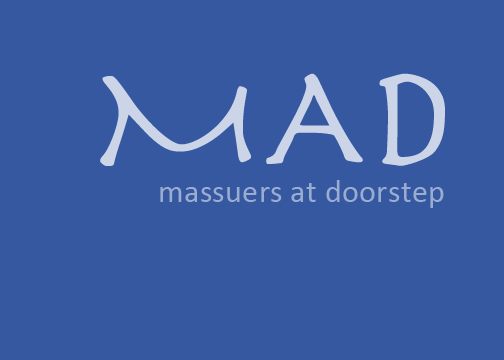
<style>
.page{position:relative;width:504px;height:360px;background:#3558a1}
.page>*{position:absolute;margin:0}
.t1{font:150px "Herculanum";letter-spacing:0.005em;color:#ccd5e7}
.t2{font:32px "Calibri";letter-spacing:0.01em;color:#9aacd0}
</style>
<div class="page">
<p class="t1" style="left:100px;top:73px;width:345px;height:93px">MAD</p>
<p class="t2" style="left:160px;top:180px;width:284px;height:28px">massuers at doorstep</p>
</div>
